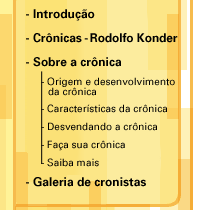
<style>
.page{position:relative;width:200px;height:210px;background:#fce687}
.page>*{position:absolute;margin:0}
.t1{font:12px/13px "Univers-Bold";color:#000000}
.t2{font:12px/13px "Univers-Bold";letter-spacing:-0.005em;color:#000000}
.t3{font:12px/13px "Univers-Bold";letter-spacing:-0.075em;color:#000000}
.t4{font:12px/13px "Univers-Bold";letter-spacing:-0.01em;color:#000000}
.t5{font:10px/10px "Univers";color:#000000}
.t6{font:10px "Univers";color:#000000}
</style>
<div class="page">
<p class="t1" style="left:26px;top:9px;width:152px;height:178px">- Introdução<br><br>- <span class="t2">Crônicas</span><span class="t3"> - </span><span class="t4">Rodolfo Konder<br></span><br>- Sobre a crônica<br><br><br><br><br><br><br><br><br><br>- Galeria de cronistas</p>
<p class="t5" style="left:41px;top:77px;width:134px;height:90px">- Origem e desenvolvimento<br><br><br>- Características da crônica <br><br>- Desvendando a crônica <br><br>- Faça sua crônica<br><br>- Saiba mais</p>
<p class="t6" style="left:48px;top:87px;width:48px;height:9px">da crônica</p>
</div>
